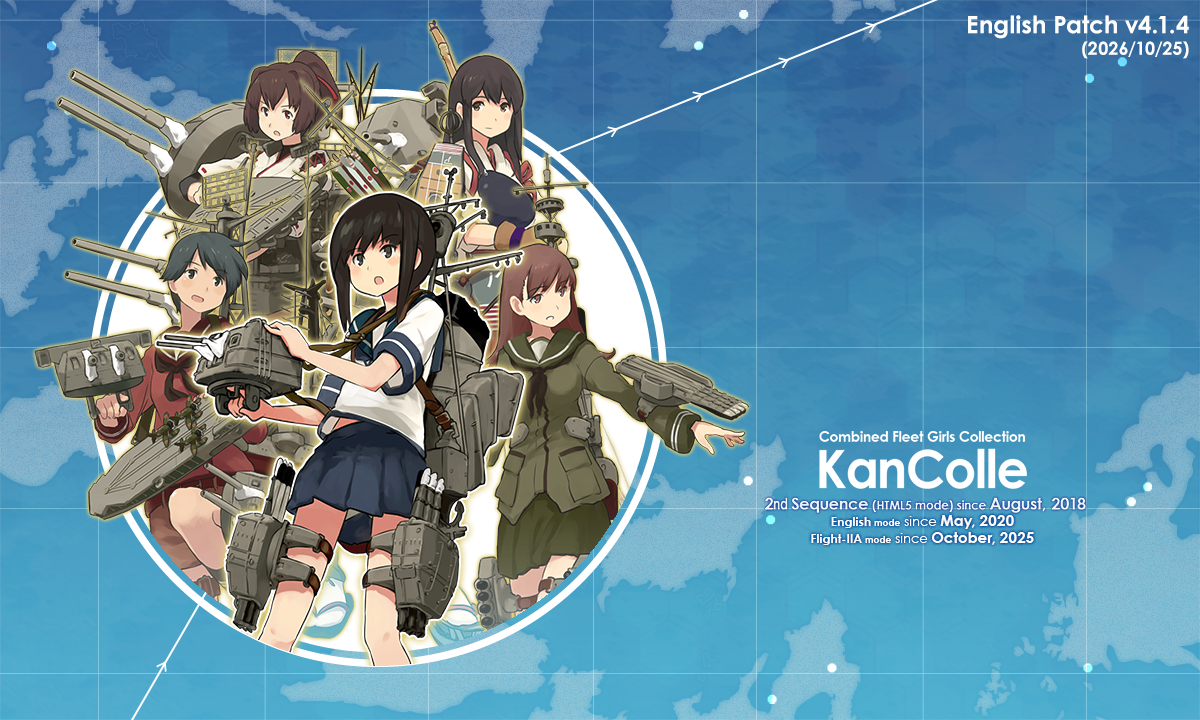
<style>
.page{position:relative;width:1200px;height:720px}
.page>*{position:absolute;margin:0}
.t1{font:24px "CenturyGothic-Bold";color:#fdfdfd}
.t2{font:18px "CenturyGothic-Bold";color:#fdfdfd}
.t3{font:15px/17px "CenturyGothic-Bold";color:#fdfdfd}
.t4{font:12px/17px "CenturyGothic-Bold";color:#fdfdfd}
.t5{font:10px/17px "CenturyGothic-Bold";color:#fdfdfd;scale:0.9 1}
.t6{font:13px/17px "CenturyGothic";color:#fdfdfd}
</style>
<div class="page">
<p class="t1" style="left:968px;top:15px;width:221px;height:44px;text-align:right">English Patch v4.1.4<br><span class="t2">(2026/10/25)</span></p>
<p class="t3" style="left:811px;top:515px;width:223px;height:30px;text-align:center"><span class="t4">English </span><span class="t5">mode </span><span class="t6">since </span>May, 2020<br><span class="t4">Flight-IIA </span><span class="t5">mode </span><span class="t6">since </span>October, 2025</p>
</div>
